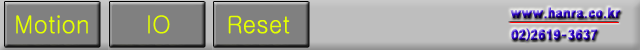
<style>
.page{position:relative;width:640px;height:50px;background:#808080}
.page>*{position:absolute;margin:0}
.t1{font:24px "Gulim";color:#e4ff00}
</style>
<div class="page">
<p class="t1" style="left:16px;top:15px;width:274px;height:19px">Motion       IO       Reset</p>
</div>
